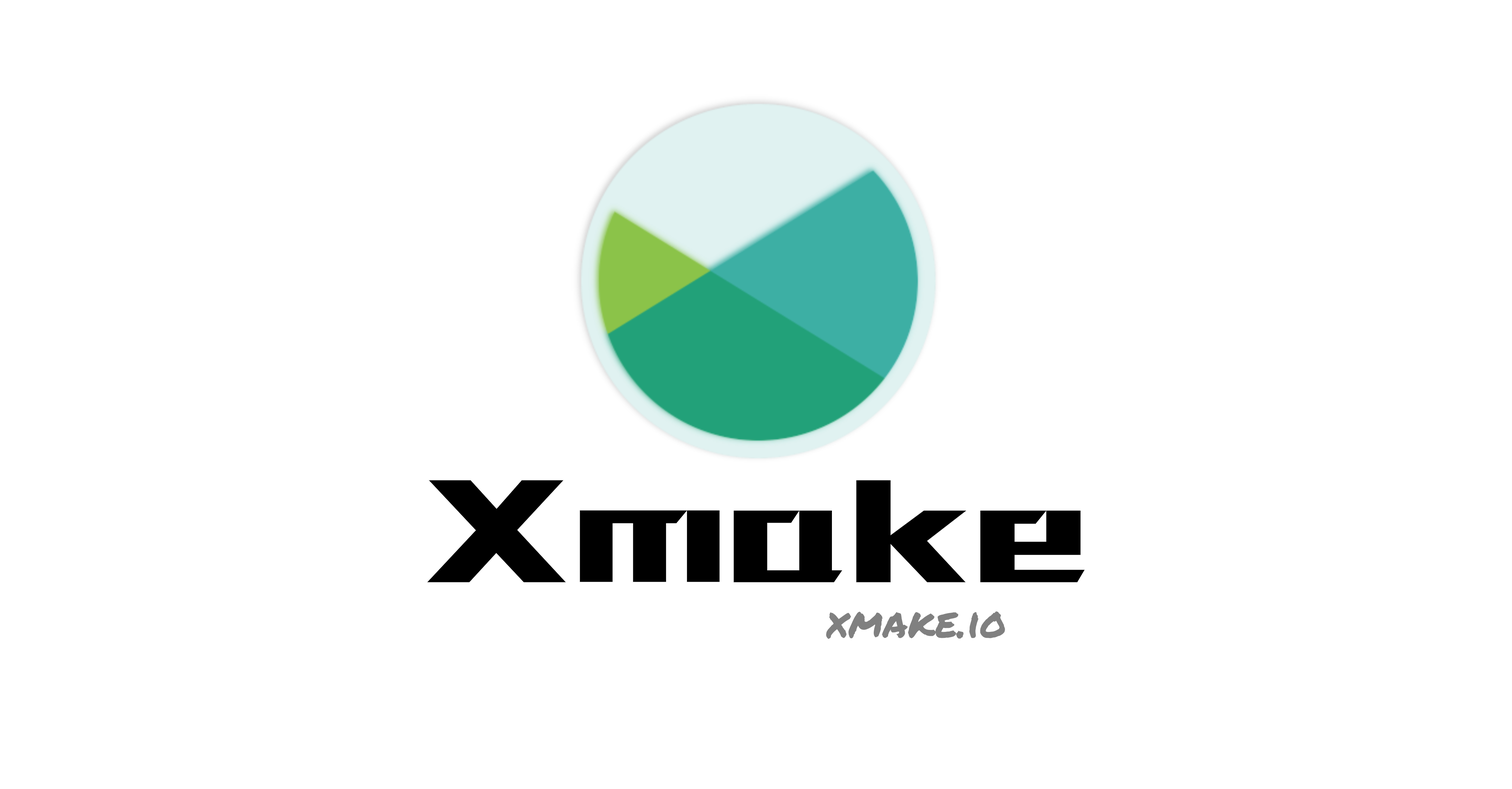
<style>
.page{position:relative;width:1512px;height:789px;background:#ffffff}
.page>*{position:absolute;margin:0}
.t1{font:177.1px "zcool-gdh";color:#000000}
.t2{font:42.5px "PermanentMarker-Regular";color:#808080}
</style>
<div class="page">
<p class="t1" style="left:427px;top:480px;width:657px;height:102px">Xmake</p>
<p class="t2" style="left:826px;top:611px;width:179px;height:28px">xmake.io</p>
</div>
